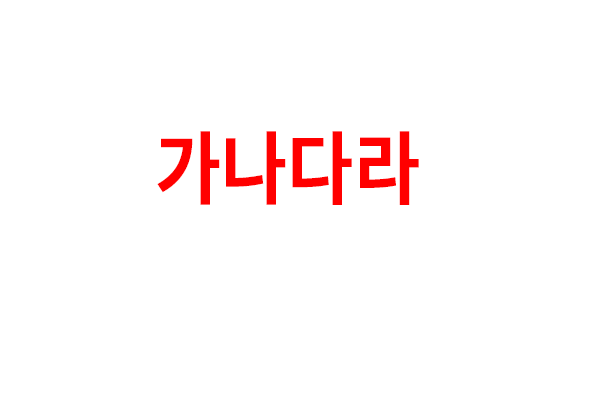
<style>
.page{position:relative;width:600px;height:400px;background:#ffffff}
.page>*{position:absolute;margin:0}
.t1{font:80px "NotoSansKR-Bold";color:#ff0000;scale:0.9 1}
</style>
<div class="page">
<p class="t1" style="left:157px;top:131px;width:262px;height:74px">가나다라</p>
</div>
